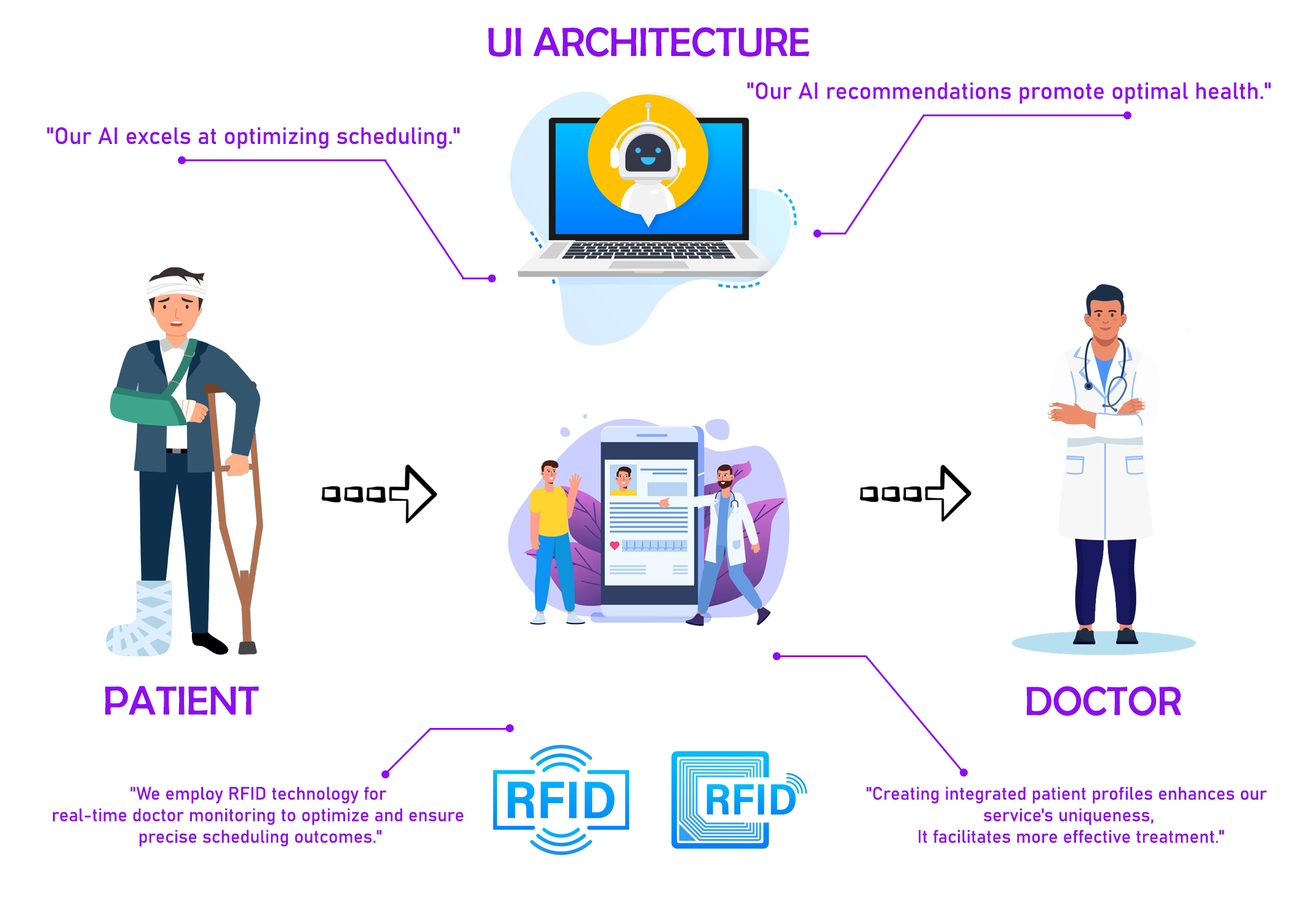
<style>
.page{position:relative;width:1292px;height:923px;background:#ffffff}
.page>*{position:absolute;margin:0}
.t1{font:41px "BerlinSansFB-Reg";color:#8d0df1}
.t2{font:23.1px "Bahnschrift";color:#8d0df1}
.t3{font:17.9px "Bahnschrift";color:#8d0df1}
</style>
<div class="page">
<p class="t1" style="left:488px;top:27px;width:322px;height:30px">UI ARCHITECTURE</p>
<p class="t2" style="left:747px;top:82px;width:524px;height:22px">"Our AI recommendations promote optimal health."</p>
<p class="t2" style="left:47px;top:127px;width:413px;height:22px">"Our AI excels at optimizing scheduling."</p>
<p class="t1" style="left:105px;top:685px;width:154px;height:30px">PATIENT</p>
<p class="t1" style="left:1026px;top:686px;width:155px;height:30px">DOCTOR</p>
<p class="t3" style="left:53px;top:786px;width:410px;height:61px;text-align:center">"We employ RFID technology for <br>real-time doctor monitoring to optimize and ensure <br>precise scheduling outcomes."</p>
<p class="t3" style="left:866px;top:786px;width:401px;height:57px;text-align:center">"Creating integrated patient profiles enhances our <br>service's uniqueness,<br> It facilitates more effective treatment."</p>
</div>
